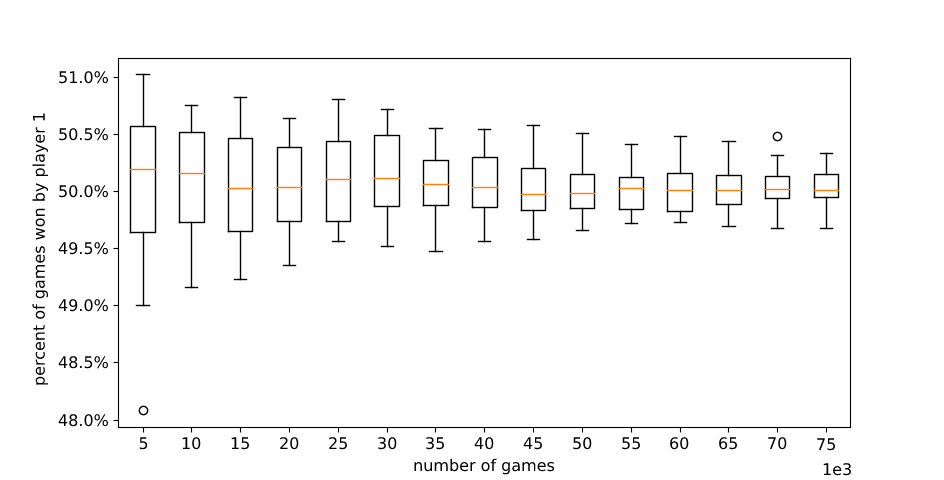
<style>
.page{position:relative;width:944px;height:480px;background:#ffffff}
.page>*{position:absolute;margin:0}
.t1{font:16px "DejaVuSans";color:#000000}
</style>
<div class="page">
<p class="t1" style="left:59px;top:71px;width:49px;height:13px">51.0%</p>
<p class="t1" style="left:32px;top:113px;width:16px;height:272px;rotate:-90deg">percent of games won by player 1</p>
<p class="t1" style="left:59px;top:128px;width:49px;height:13px">50.5%</p>
<p class="t1" style="left:59px;top:185px;width:49px;height:13px">50.0%</p>
<p class="t1" style="left:58px;top:242px;width:50px;height:13px">49.5%</p>
<p class="t1" style="left:58px;top:299px;width:50px;height:13px">49.0%</p>
<p class="t1" style="left:58px;top:356px;width:50px;height:13px">48.5%</p>
<p class="t1" style="left:58px;top:414px;width:50px;height:13px">48.0%</p>
<p class="t1" style="left:139px;top:437px;width:9px;height:13px">5</p>
<p class="t1" style="left:182px;top:437px;width:19px;height:13px">10</p>
<p class="t1" style="left:231px;top:437px;width:18px;height:13px">15</p>
<p class="t1" style="left:280px;top:437px;width:19px;height:13px">20</p>
<p class="t1" style="left:329px;top:437px;width:18px;height:13px">25</p>
<p class="t1" style="left:378px;top:437px;width:19px;height:13px">30</p>
<p class="t1" style="left:426px;top:437px;width:18px;height:13px">35</p>
<p class="t1" style="left:474px;top:437px;width:20px;height:13px">40</p>
<p class="t1" style="left:523px;top:437px;width:19px;height:13px">45</p>
<p class="t1" style="left:573px;top:437px;width:19px;height:13px">50</p>
<p class="t1" style="left:622px;top:437px;width:18px;height:13px">55</p>
<p class="t1" style="left:670px;top:437px;width:19px;height:13px">60</p>
<p class="t1" style="left:719px;top:437px;width:18px;height:13px">65</p>
<p class="t1" style="left:768px;top:437px;width:19px;height:13px">70</p>
<p class="t1" style="left:817px;top:438px;width:18px;height:13px">75</p>
<p class="t1" style="left:414px;top:458px;width:141px;height:17px">number of games</p>
<p class="t1" style="left:823px;top:463px;width:28px;height:13px">1e3</p>
</div>
